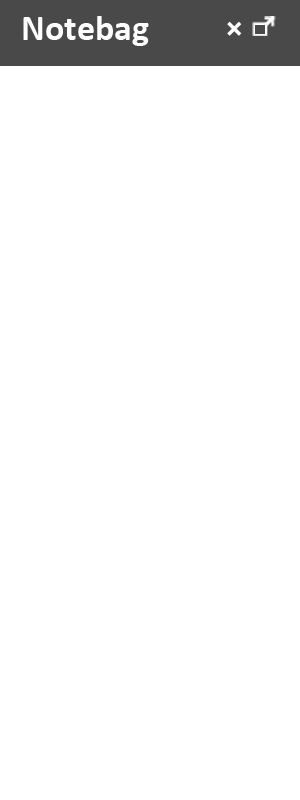
<style>
.page{position:relative;width:300px;height:800px;background:#ffffff}
.page>*{position:absolute;margin:0}
.t1{font:36px "Calibri-Bold";color:#ffffff}
</style>
<div class="page">
<p class="t1" style="left:23px;top:16px;width:126px;height:30px">Notebag</p>
</div>
